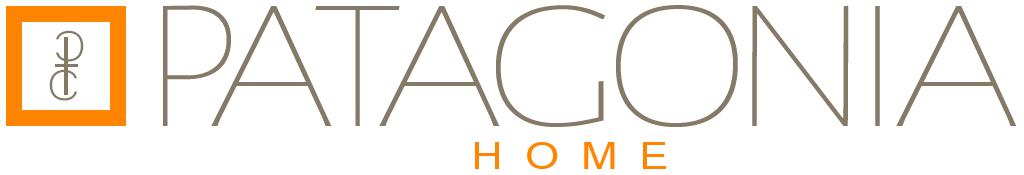
<style>
.page{position:relative;width:1024px;height:175px;background:#ffffff}
.page>*{position:absolute;margin:0}
.t1{font:188.3px "AlegreyaSans-Thin";letter-spacing:0.2em;color:#857968;scale:1.12 1}
.t2{font:188.3px "AlegreyaSans-Thin";letter-spacing:0.2em;color:#857968;scale:1.25 1}
.t3{font:188.3px "AlegreyaSans-Thin";letter-spacing:0.2em;color:#857968;scale:1.06 1}
.t4{font:188.3px "AlegreyaSans-Thin";letter-spacing:0.2em;color:#857968;scale:1.22 1}
.t5{font:188.3px "AlegreyaSans-Thin";letter-spacing:0.2em;color:#857968;scale:1.13 1}
.t6{font:55.6px "Microsoft-Yi-Baiti";color:#857968;scale:1.08 1}
.t7{font:37px "ArialMT";letter-spacing:0.5em;color:#ff8400;scale:1.19 1}
</style>
<div class="page">
<p class="t1" style="left:163px;top:5px;width:68px;height:121px">P</p>
<p class="t2" style="left:211px;top:6px;width:121px;height:120px">A</p>
<p class="t3" style="left:315px;top:6px;width:85px;height:120px">T</p>
<p class="t2" style="left:379px;top:6px;width:121px;height:120px">A</p>
<p class="t4" style="left:496px;top:5px;width:109px;height:122px">G</p>
<p class="t4" style="left:616px;top:5px;width:122px;height:122px">O</p>
<p class="t5" style="left:752px;top:5px;width:97px;height:121px">N</p>
<p class="t5" style="left:875px;top:6px;width:5px;height:120px">I</p>
<p class="t2" style="left:896px;top:6px;width:121px;height:120px">A</p>
<p class="t6" style="left:56px;top:30px;width:28px;height:32px;rotate:180deg">C</p>
<p class="t6" style="left:49px;top:69px;width:28px;height:32px">C</p>
<p class="t7" style="left:475px;top:142px;width:24px;height:27px">H</p>
<p class="t7" style="left:527px;top:142px;width:31px;height:27px">O</p>
<p class="t7" style="left:584px;top:142px;width:31px;height:27px">M</p>
<p class="t7" style="left:643px;top:142px;width:23px;height:27px">E</p>
</div>
